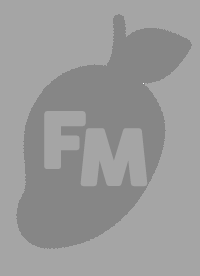
<style>
.page{position:relative;width:200px;height:276px;background:#a5a5a5}
.page>*{position:absolute;margin:0}
.t1{font:75px "Cocogoose";letter-spacing:0.025em;color:#a5a5a5;font-weight:bold}
</style>
<div class="page">
<p class="t1" style="left:44px;top:111px;width:42px;height:58px">F</p>
<p class="t1" style="left:80px;top:128px;width:68px;height:59px">M</p>
</div>
